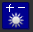
<style>
.page{position:relative;width:33px;height:32px;background:#000090}
.page>*{position:absolute;margin:0}
.t1{font:10.4px "SimSun";color:#ffffff}
</style>
<div class="page">
<p class="t1" style="left:6px;top:4px;width:19px;height:8px">十一</p>
</div>
